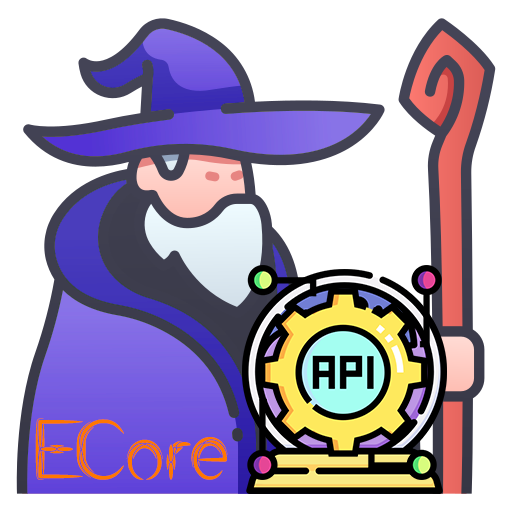
<style>
.page{position:relative;width:512px;height:512px;background:#ffffff}
.page>*{position:absolute;margin:0}
.t1{font:96px "IVORYCULTURE";letter-spacing:0.02em;color:#ff7700}
</style>
<div class="page">
<p class="t1" style="left:35px;top:418px;width:193px;height:62px">ECore</p>
</div>
